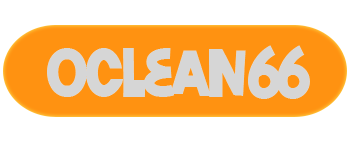
<style>
.page{position:relative;width:350px;height:142px;background:#ffffff}
.page>*{position:absolute;margin:0}
.t1{font:60px "RichuMastRegular";color:#d6d6d6}
</style>
<div class="page">
<p class="t1" style="left:47px;top:45px;width:263px;height:54px">oclean66</p>
</div>
